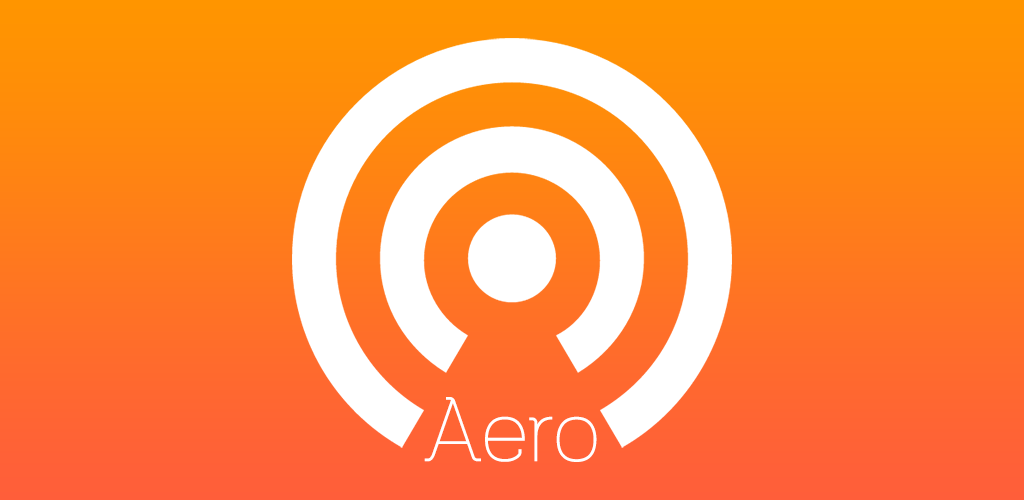
<style>
.page{position:relative;width:1024px;height:500px}
.page>*{position:absolute;margin:0}
.t1{font:91.7px "EspacioNovoMedium";color:#ffffff}
</style>
<div class="page">
<p class="t1" style="left:424px;top:397px;width:173px;height:65px">Aero</p>
</div>
